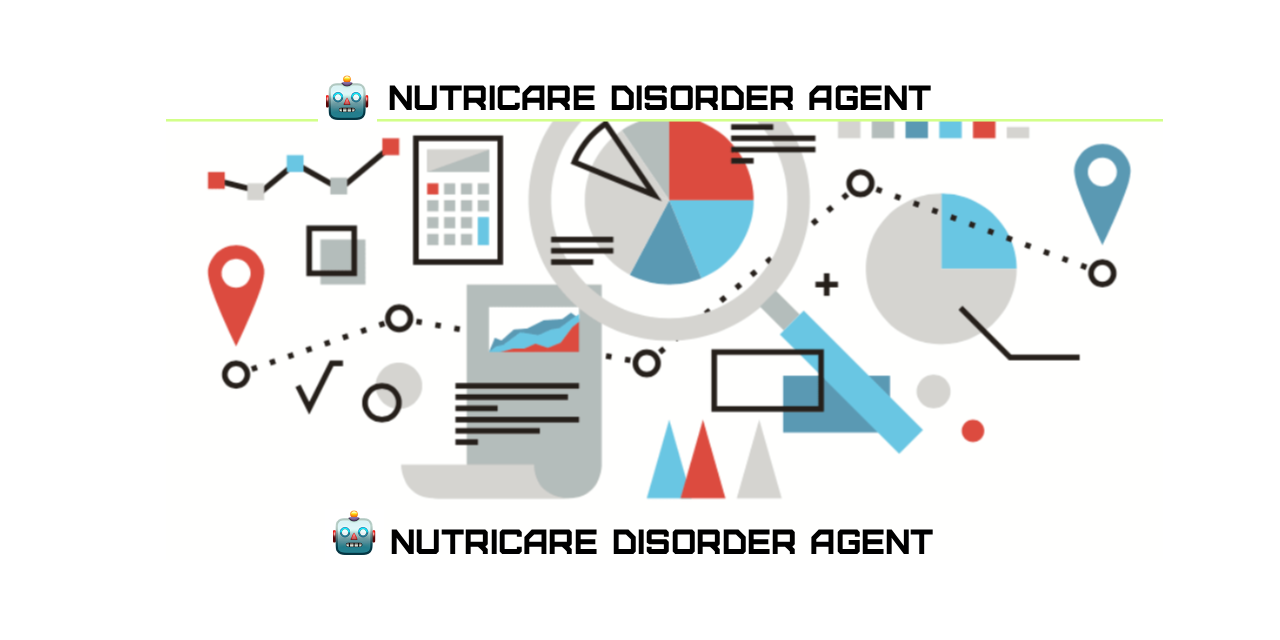
<style>
.page{position:relative;width:1280px;height:640px;background:#ffffff}
.page>*{position:absolute;margin:0}
.t1{font:35px "Furore";color:#000000}
</style>
<div class="page">
<p class="t1" style="left:389px;top:85px;width:542px;height:25px">Nutricare Disorder Agent</p>
<p class="t1" style="left:391px;top:529px;width:542px;height:25px">Nutricare Disorder Agent</p>
</div>
